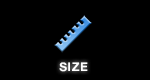
<style>
.page{position:relative;width:150px;height:80px;background:#000000}
.page>*{position:absolute;margin:0}
.t1{font:12px "AlteHaasGrotesk_Bold";letter-spacing:0.05em;color:#ffffff}
</style>
<div class="page">
<p class="t1" style="left:59px;top:62px;width:29px;height:10px">SIZE</p>
</div>
